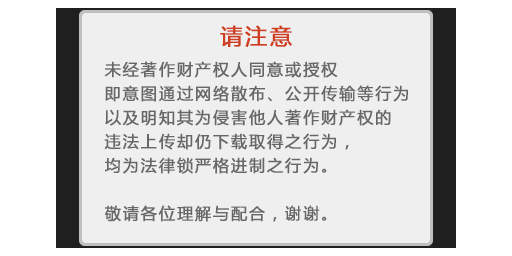
<style>
.page{position:relative;width:512px;height:256px;background:#efefef}
.page>*{position:absolute;margin:0}
.t1{font:22px "MicrosoftYaHei";letter-spacing:0.1em;color:#cf3f1f;font-weight:bold}
.t2{font:16px/24px "MicrosoftYaHei";letter-spacing:0.1em;color:#676767;font-weight:bold}
</style>
<div class="page">
<p class="t1" style="left:220px;top:25px;width:72px;height:22px">请注意</p>
<p class="t2" style="left:104px;top:61px;width:304px;height:161px">未经著作财产权人同意或授权<br>即意图通过网络散布、公开传输等行为<br>以及明知其为侵害他人著作财产权的<br>违法上传却仍下载取得之行为，<br>均为法律锁严格进制之行为。<br><br>敬请各位理解与配合，谢谢。</p>
</div>
